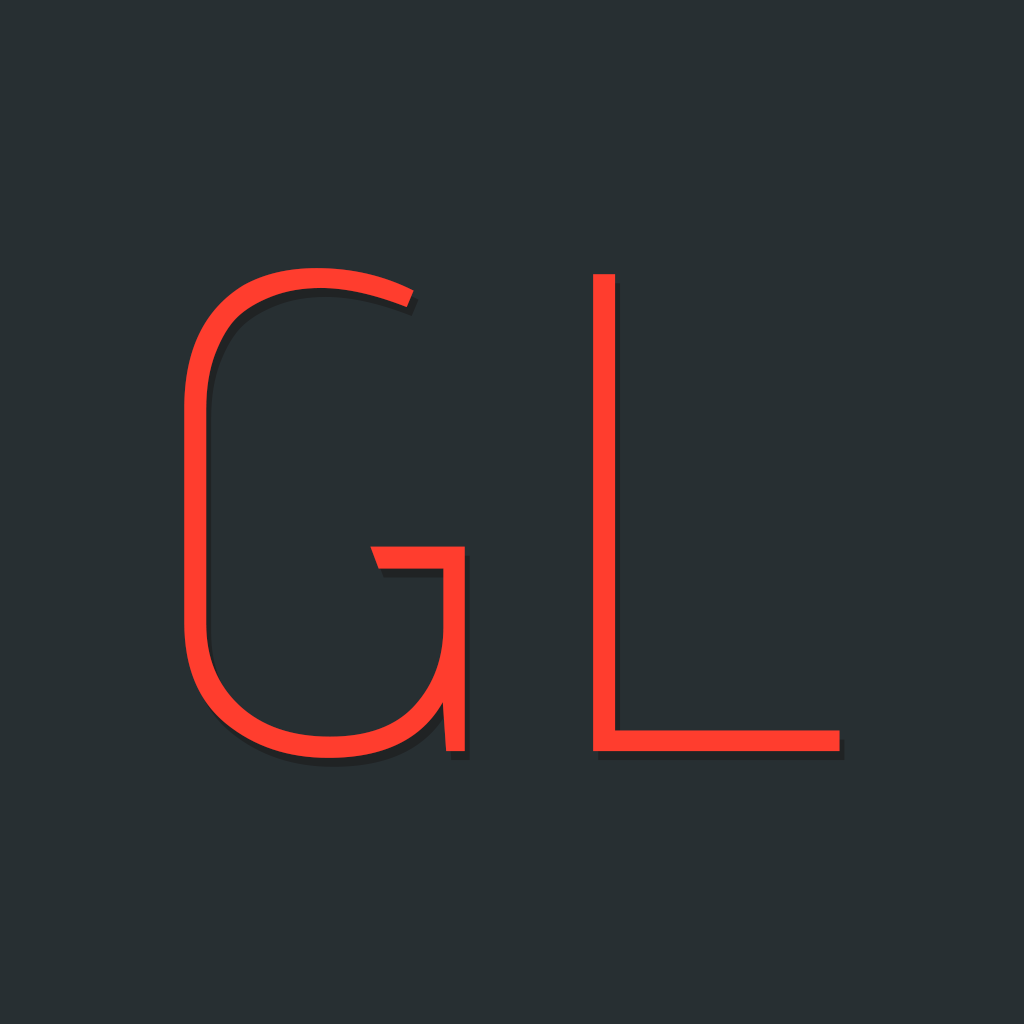
<style>
.page{position:relative;width:1024px;height:1024px;background:#272f32}
.page>*{position:absolute;margin:0}
.t1{font:680.7px "AdventPro-ExtraLight";letter-spacing:0.05em;color:#ff3d2e}
</style>
<div class="page">
<p class="t1" style="left:184px;top:268px;width:656px;height:490px">GL</p>
</div>
